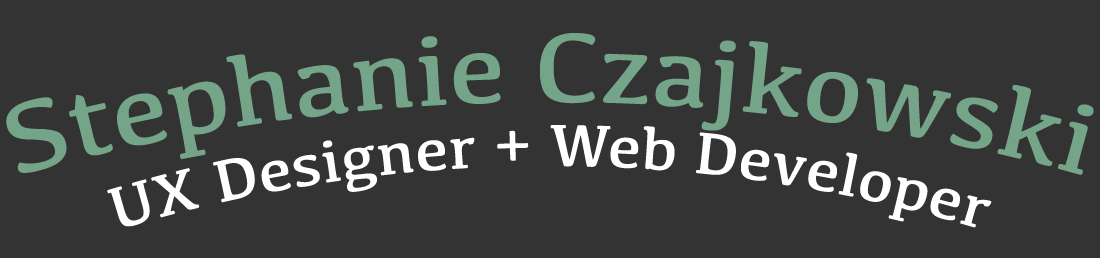
<style>
.page{position:relative;width:1100px;height:258px;background:#333333}
.page>*{position:absolute;margin:0}
.t1{font:101.5px "Kefa-Regular";color:#74a588}
.t2{font:61.2px "Kefa-Regular";color:#ffffff}
</style>
<div class="page">
<p class="t1" style="left:6px;top:33px;width:1088px;height:142px">Stephanie Czajkowski</p>
<p class="t2" style="left:107px;top:125px;width:885px;height:103px">UX Designer + Web Developer</p>
</div>
